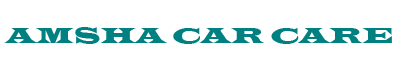
<style>
.page{position:relative;width:400px;height:70px;background:#ffffff}
.page>*{position:absolute;margin:0}
.t1{font:22.2px "LatinWide";color:#008080}
</style>
<div class="page">
<p class="t1" style="left:4px;top:27px;width:388px;height:17px">AMSHA CAR CARE</p>
</div>
